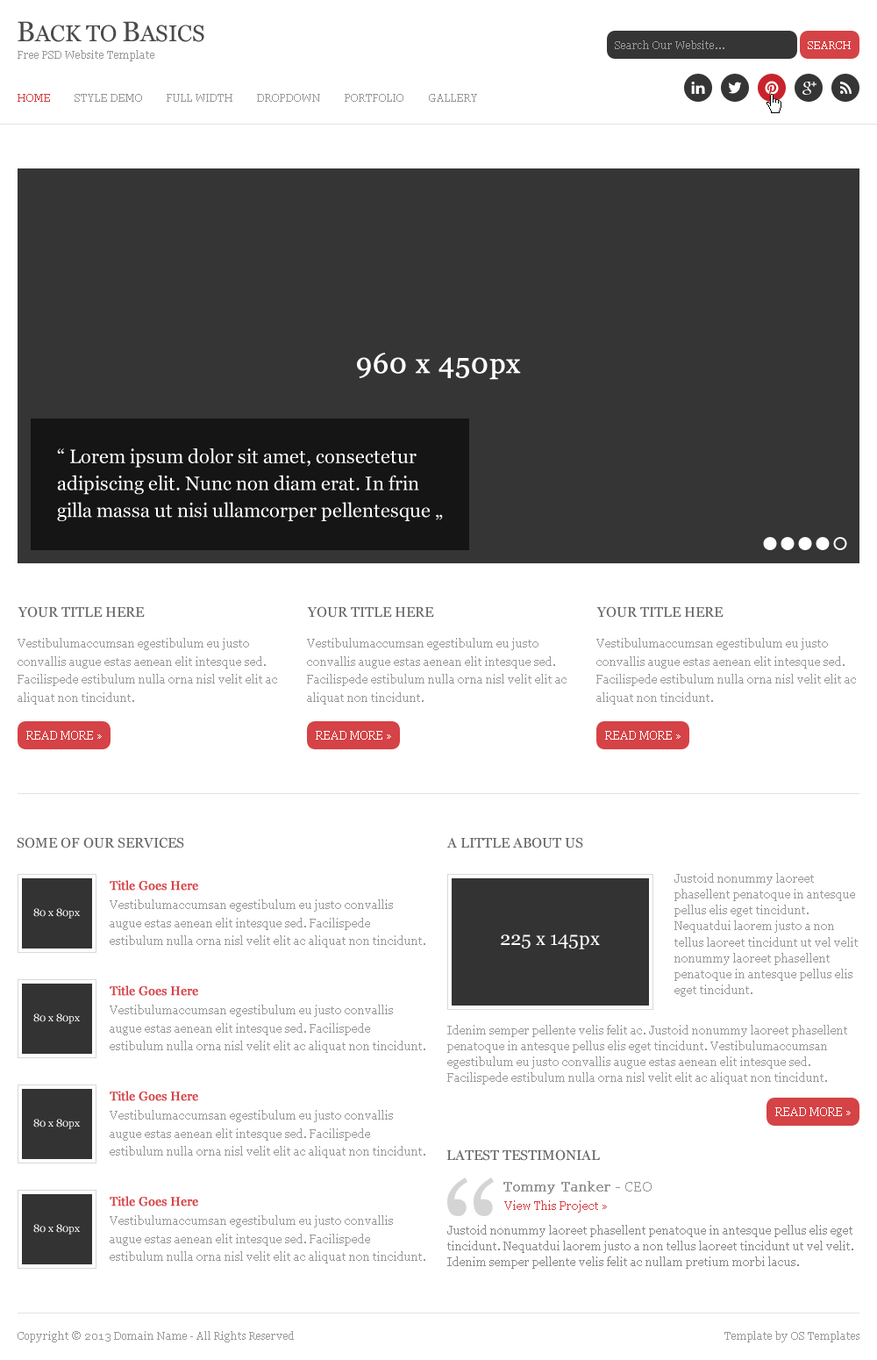
<style>
.page{position:relative;width:877px;height:1360px;background:#ffffff}
.page>*{position:absolute;margin:0}
.t1{font:22.8px "Georgia";color:#4a4a4a}
.t2{font:28.1px "Georgia";color:#4a4a4a}
.t3{font:10.5px "Georgia";color:#999999}
.t4{font:10.5px "Georgia";color:#ffffff}
.t5{font:10.5px "Georgia";color:#d54346}
.t6{font:28.1px "Georgia";color:#ffffff;font-weight:bold}
.t7{font:19.3px/27px "Georgia";color:#ffffff}
.t8{font:14px "Georgia";color:#666666}
.t9{font:11.4px/18.2px "Georgia";color:#999999}
.t10{font:11.4px "Georgia";color:#ffffff}
.t11{font:12.3px "Georgia";color:#d54346;font-weight:bold}
.t12{font:11.4px/16px "Georgia";color:#999999}
.t13{font:19.3px "Georgia";color:#ffffff}
.t14{font:14px "Georgia";color:#989898;font-weight:bold}
.t15{font:14px "Georgia";color:#989898}
.t16{font:11.4px "Georgia";color:#d54346}
.t17{font:11.4px/16px "Georgia";color:#888888}
</style>
<div class="page">
<p class="t1" style="left:18px;top:21px;width:186px;height:21px"><span class="t2">B</span>ACK TO <span class="t2">B</span>ASICS</p>
<p class="t3" style="left:615px;top:40px;width:109px;height:9px">Search Our Website...</p>
<p class="t4" style="left:808px;top:41px;width:43px;height:8px">SEARCH</p>
<p class="t3" style="left:18px;top:50px;width:136px;height:11px">Free PSD Website Template</p>
<p class="t5" style="left:18px;top:94px;width:32px;height:8px">HOME</p>
<p class="t3" style="left:75px;top:94px;width:67px;height:8px">STYLE DEMO</p>
<p class="t3" style="left:167px;top:94px;width:65px;height:8px">FULL WIDTH</p>
<p class="t3" style="left:257px;top:94px;width:63px;height:8px">DROPDOWN</p>
<p class="t3" style="left:345px;top:94px;width:58px;height:8px">PORTFOLIO</p>
<p class="t3" style="left:429px;top:94px;width:48px;height:8px">GALLERY</p>
<p class="t6" style="left:357px;top:353px;width:164px;height:27px">960 x 450px</p>
<p class="t7" style="left:57px;top:448px;width:386px;height:73px">“ Lorem ipsum dolor sit amet, consectetur adipiscing elit. Nunc non diam erat. In frin gilla massa ut nisi ullamcorper pellentesque „</p>
<p class="t8" style="left:18px;top:606px;width:127px;height:11px">YOUR TITLE HERE</p>
<p class="t8" style="left:307px;top:606px;width:127px;height:11px">YOUR TITLE HERE</p>
<p class="t8" style="left:596px;top:606px;width:128px;height:11px">YOUR TITLE HERE</p>
<p class="t9" style="left:18px;top:638px;width:259px;height:66px">Vestibulumaccumsan egestibulum eu justo convallis augue estas aenean elit intesque sed. Facilispede estibulum nulla orna nisl velit elit ac aliquat non tincidunt.</p>
<p class="t9" style="left:307px;top:638px;width:260px;height:66px">Vestibulumaccumsan egestibulum eu justo convallis augue estas aenean elit intesque sed. Facilispede estibulum nulla orna nisl velit elit ac aliquat non tincidunt.</p>
<p class="t9" style="left:596px;top:638px;width:260px;height:66px">Vestibulumaccumsan egestibulum eu justo convallis augue estas aenean elit intesque sed. Facilispede estibulum nulla orna nisl velit elit ac aliquat non tincidunt.</p>
<p class="t10" style="left:26px;top:731px;width:76px;height:8px">READ MORE »</p>
<p class="t10" style="left:316px;top:731px;width:75px;height:8px">READ MORE »</p>
<p class="t10" style="left:605px;top:731px;width:76px;height:8px">READ MORE »</p>
<p class="t8" style="left:17px;top:837px;width:167px;height:11px">SOME OF OUR SERVICES</p>
<p class="t8" style="left:446px;top:837px;width:137px;height:11px">A LITTLE ABOUT US</p>
<p class="t11" style="left:110px;top:880px;width:88px;height:10px">Title Goes Here</p>
<p class="t12" style="left:674px;top:873px;width:184px;height:123px">Justoid nonummy laoreet phasellent penatoque in antesque pellus elis eget tincidunt. Nequatdui laorem justo a non tellus laoreet tincidunt ut vel velit nonummy laoreet phasellent penatoque in antesque pellus elis eget tincidunt.</p>
<p class="t9" style="left:110px;top:899px;width:315px;height:48px">Vestibulumaccumsan egestibulum eu justo convallis augue estas aenean elit intesque sed. Facilispede estibulum nulla orna nisl velit elit ac aliquat non tincidunt.</p>
<p class="t4" style="left:33px;top:908px;width:47px;height:10px">80 x 80px</p>
<p class="t13" style="left:501px;top:934px;width:99px;height:15px">225 x 145px</p>
<p class="t11" style="left:110px;top:985px;width:88px;height:11px">Title Goes Here</p>
<p class="t4" style="left:33px;top:1013px;width:47px;height:11px">80 x 80px</p>
<p class="t9" style="left:110px;top:1004px;width:315px;height:49px">Vestibulumaccumsan egestibulum eu justo convallis augue estas aenean elit intesque sed. Facilispede estibulum nulla orna nisl velit elit ac aliquat non tincidunt.</p>
<p class="t12" style="left:447px;top:1024px;width:400px;height:60px">Idenim semper pellente velis felit ac. Justoid nonummy laoreet phasellent penatoque in antesque pellus elis eget tincidunt. Vestibulumaccumsan egestibulum eu justo convallis augue estas aenean elit intesque sed. Facilispede estibulum nulla orna nisl velit elit ac aliquat non tincidunt.</p>
<p class="t11" style="left:110px;top:1090px;width:88px;height:11px">Title Goes Here</p>
<p class="t9" style="left:110px;top:1110px;width:315px;height:48px">Vestibulumaccumsan egestibulum eu justo convallis augue estas aenean elit intesque sed. Facilispede estibulum nulla orna nisl velit elit ac aliquat non tincidunt.</p>
<p class="t10" style="left:775px;top:1107px;width:76px;height:9px">READ MORE »</p>
<p class="t4" style="left:33px;top:1118px;width:47px;height:11px">80 x 80px</p>
<p class="t8" style="left:446px;top:1149px;width:154px;height:11px">LATEST TESTIMONIAL</p>
<p class="t14" style="left:503px;top:1181px;width:149px;height:13px">Tommy Tanker<span class="t15"> - CEO</span></p>
<p class="t11" style="left:110px;top:1195px;width:88px;height:11px">Title Goes Here</p>
<p class="t16" style="left:504px;top:1200px;width:103px;height:12px">View This Project »</p>
<p class="t9" style="left:110px;top:1215px;width:315px;height:48px">Vestibulumaccumsan egestibulum eu justo convallis augue estas aenean elit intesque sed. Facilispede estibulum nulla orna nisl velit elit ac aliquat non tincidunt.</p>
<p class="t4" style="left:33px;top:1224px;width:47px;height:10px">80 x 80px</p>
<p class="t17" style="left:447px;top:1224px;width:406px;height:44px">Justoid nonummy laoreet phasellent penatoque in antesque pellus elis eget tincidunt. Nequatdui laorem justo a non tellus laoreet tincidunt ut vel velit. Idenim semper pellente velis felit ac nullam pretium morbi lacus.</p>
<p class="t3" style="left:18px;top:1331px;width:276px;height:11px">Copyright © 2013 Domain Name - All Rights Reserved</p>
<p class="t3" style="left:724px;top:1331px;width:136px;height:11px">Template by OS Templates</p>
</div>
